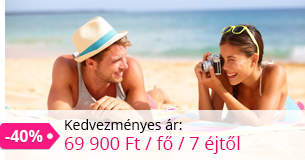
<style>
.page{position:relative;width:305px;height:160px}
.page>*{position:absolute;margin:0}
.t1{font:18px/20px "OpenSans";color:#ec006e}
.t2{font:14px/20px "OpenSans";color:#000000}
.t3{font:16px "OpenSans-Bold";color:#ffffff}
</style>
<div class="page">
<p class="t1" style="left:64px;top:119px;width:176px;height:35px"><span class="t2">Kedvezményes ár: <br></span>69 900 Ft / fő / 7 éjtől</p>
<p class="t3" style="left:5px;top:130px;width:38px;height:12px">-40%</p>
</div>
